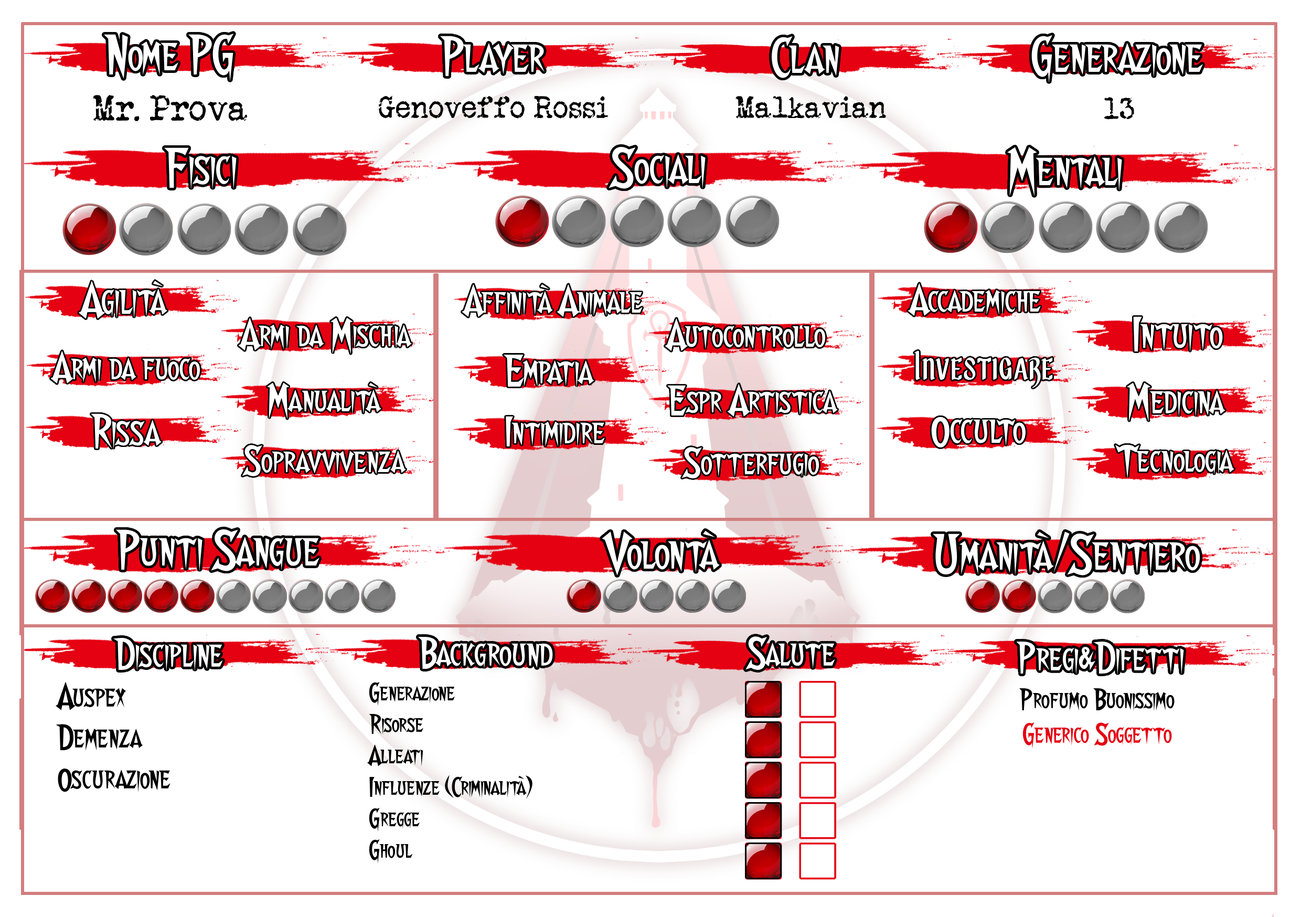
<style>
.page{position:relative;width:1301px;height:917px;background:#ffffff}
.page>*{position:absolute;margin:0}
.t1{font:52.4px "Walshes-Regular";color:#ffffff}
.t2{font:36.7px "VeteranTypewriter";color:#000000}
.t3{font:31.5px "VeteranTypewriter";color:#000000}
.t4{font:45.5px "Walshes-Regular";color:#ffffff}
.t5{font:39.3px "Walshes-Regular";color:#ffffff}
.t6{font:39.3px "Solander-Demo";color:#ffffff}
.t7{font:42px "Walshes-Regular";color:#ffffff}
.t8{font:44.6px "Walshes-Regular";color:#ffffff}
.t9{font:34.1px "Walshes-Regular";color:#000000}
.t10{font:26.2px "Walshes-Regular";color:#000000}
.t11{font:28.8px "Walshes-Regular";color:#000000}
.t12{font:28.8px "Walshes-Regular";color:#e50012}
</style>
<div class="page">
<p class="t1" style="left:104px;top:33px;width:130px;height:48px">Nome PG</p>
<p class="t1" style="left:440px;top:36px;width:105px;height:40px">Player</p>
<p class="t1" style="left:771px;top:36px;width:68px;height:42px">Clan</p>
<p class="t1" style="left:1031px;top:35px;width:172px;height:48px">Generazione</p>
<p class="t2" style="left:92px;top:94px;width:155px;height:27px">Mr. Prova</p>
<p class="t3" style="left:379px;top:95px;width:229px;height:24px">Genoveffo Rossi</p>
<p class="t3" style="left:735px;top:96px;width:151px;height:23px">Malkavian</p>
<p class="t3" style="left:1104px;top:97px;width:30px;height:23px">13</p>
<p class="t1" style="left:164px;top:147px;width:73px;height:43px">Fisici</p>
<p class="t1" style="left:608px;top:146px;width:97px;height:43px">Sociali</p>
<p class="t1" style="left:1007px;top:147px;width:115px;height:50px">Mentali</p>
<p class="t4" style="left:78px;top:280px;width:89px;height:39px">Agilità</p>
<p class="t5" style="left:462px;top:284px;width:180px;height:33px">Affinità Animale</p>
<p class="t5" style="left:907px;top:283px;width:134px;height:33px">Accademiche</p>
<p class="t5" style="left:238px;top:317px;width:174px;height:38px">Armi da Mischia</p>
<p class="t5" style="left:665px;top:318px;width:161px;height:33px">Autocontrollo</p>
<p class="t4" style="left:1133px;top:316px;width:90px;height:37px">Intuito</p>
<p class="t5" style="left:50px;top:350px;width:150px;height:34px">Armi da fuoco</p>
<p class="t6" style="left:914px;top:350px;width:139px;height:38px">Investigare</p>
<p class="t7" style="left:503px;top:355px;width:91px;height:33px">Empatia</p>
<p class="t5" style="left:267px;top:382px;width:114px;height:38px">Manualità</p>
<p class="t5" style="left:667px;top:383px;width:171px;height:34px">Espr Artistica</p>
<p class="t7" style="left:1127px;top:382px;width:98px;height:40px">Medicina</p>
<p class="t4" style="left:91px;top:413px;width:71px;height:37px">Rissa</p>
<p class="t5" style="left:506px;top:416px;width:99px;height:32px">Intimidire</p>
<p class="t8" style="left:931px;top:416px;width:94px;height:31px">Occulto</p>
<p class="t5" style="left:242px;top:445px;width:164px;height:32px">Sopravvivenza</p>
<p class="t5" style="left:681px;top:447px;width:138px;height:32px">Sotterfugio</p>
<p class="t5" style="left:1114px;top:444px;width:120px;height:35px">Tecnologia</p>
<p class="t1" style="left:115px;top:529px;width:204px;height:43px">Punti Sangue</p>
<p class="t1" style="left:602px;top:530px;width:118px;height:45px">Volontà</p>
<p class="t1" style="left:933px;top:531px;width:267px;height:45px">Umanità/Sentiero</p>
<p class="t7" style="left:113px;top:637px;width:110px;height:34px">Discipline</p>
<p class="t7" style="left:418px;top:637px;width:135px;height:32px">Background</p>
<p class="t7" style="left:745px;top:636px;width:90px;height:34px">Salute</p>
<p class="t7" style="left:1016px;top:641px;width:168px;height:34px">Pregi&amp;Difetti</p>
<p class="t9" style="left:56px;top:681px;width:114px;height:111px">Auspex<br>Demenza<br>Oscurazione</p>
<p class="t10" style="left:367px;top:681px;width:165px;height:182px">Generazione<br>Risorse<br>Alleati<br>Influenze (Criminalità)<br>Gregge<br>Ghoul</p>
<p class="t11" style="left:1019px;top:688px;width:155px;height:61px;text-align:center">Profumo Buonissimo<br><span class="t12">Generico Soggetto</span></p>
</div>
